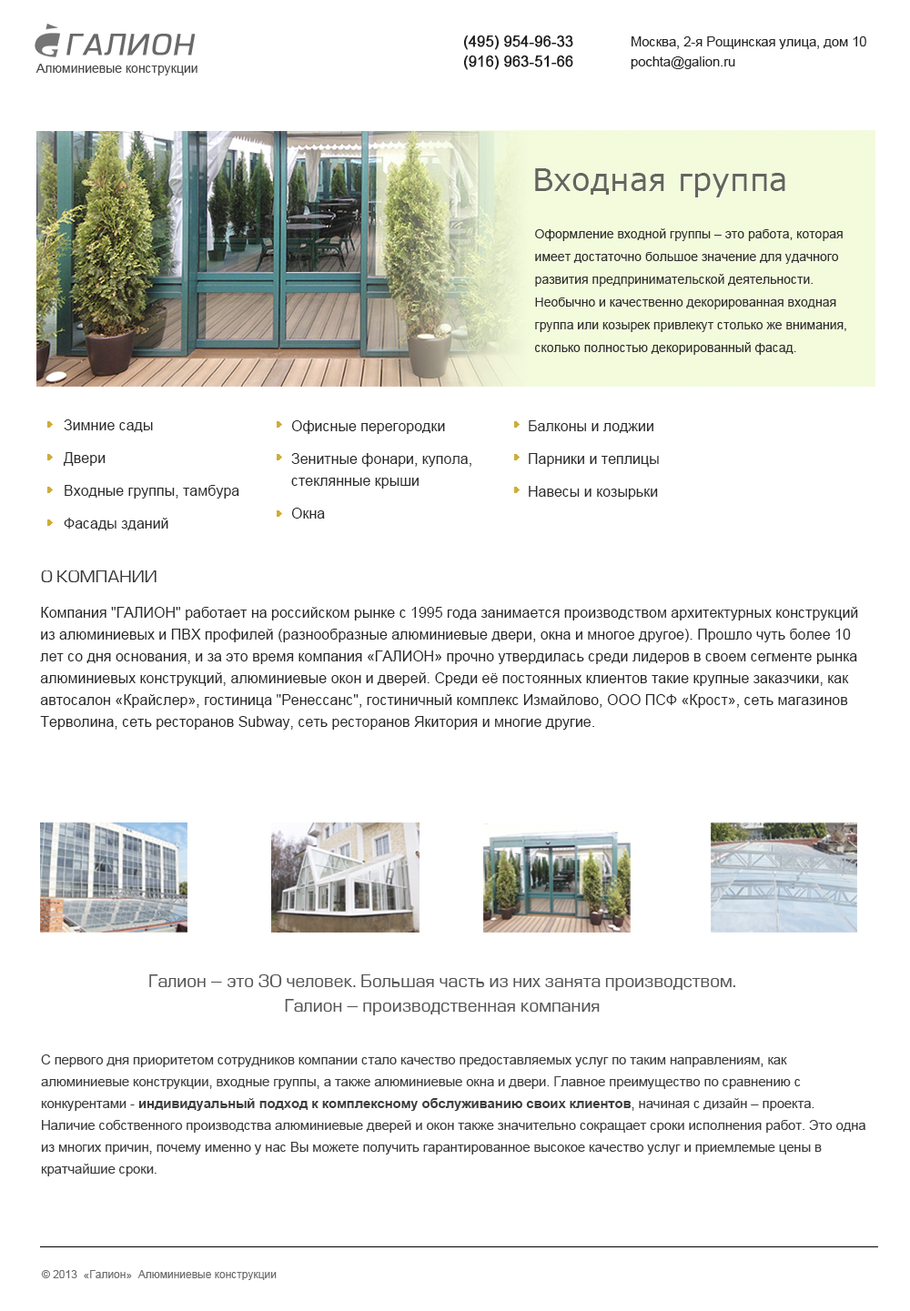
<style>
.page{position:relative;width:910px;height:1311px;background:#ffffff}
.page>*{position:absolute;margin:0}
.t1{font:27.3px "Europe-Italic";letter-spacing:0.06em;color:#696969;font-weight:bold}
.t2{font:14.6px/20px "ArialMT";color:#1f1f1f;font-weight:bold}
.t3{font:13.3px/20px "ArialMT";color:#262525}
.t4{font:12.7px "ArialMT";color:#4c4c4c}
.t5{font:30.9px "Verdana";color:#63665d}
.t6{font:12.7px/22.7px "ArialMT";color:#313131}
.t7{font:14.6px/32.7px "ArialMT";color:#2b2b2b}
.t8{font:14.6px/21.8px "ArialMT";color:#2b2b2b}
.t9{font:16.4px "EuropeNormal";color:#363636;text-transform:uppercase}
.t10{font:14.6px/21.8px "ArialMT";color:#282828}
.t11{font:17.3px/24.6px "EuropeNormal";color:#545454}
.t12{font:13.3px/21.8px "ArialMT";color:#3e3e3e}
.t13{font:13.3px/21.8px "Arial-BoldMT";color:#3e3e3e}
.t14{font:10.9px "ArialMT";color:#6d6d6d}
</style>
<div class="page">
<p class="t1" style="left:66px;top:34px;width:130px;height:21px">ГАЛИОН</p>
<p class="t2" style="left:463px;top:35px;width:110px;height:35px">(495) 954-96-33<br>(916) 963-51-66</p>
<p class="t3" style="left:630px;top:36px;width:236px;height:33px">Москва, 2-я Рощинская улица, дом 10<br>pochta@galion.ru</p>
<p class="t4" style="left:35px;top:64px;width:162px;height:12px">Алюминиевые конструкции</p>
<p class="t5" style="left:535px;top:168px;width:250px;height:29px">Входная группа</p>
<p class="t6" style="left:535px;top:228px;width:311px;height:127px">Оформление входной группы – это работа, которая имеет достаточно большое значение для удачного развития предпринимательской деятельности. Необычно и качественно декорированная входная группа или козырек привлекут столько же внимания, сколько полностью декорированный фасад.</p>
<p class="t7" style="left:63px;top:419px;width:176px;height:111px">Зимние сады<br>Двери<br>Входные группы, тамбура<br>Фасады зданий</p>
<p class="t7" style="left:291px;top:420px;width:180px;height:99px">Офисные перегородки<br>Зенитные фонари, купола,<br><span class="t8">стеклянные крыши<br></span>Окна</p>
<p class="t7" style="left:529px;top:420px;width:130px;height:79px">Балконы и лоджии<br>Парники и теплицы<br>Навесы и козырьки</p>
<p class="t9" style="left:41px;top:570px;width:115px;height:12px">О Компании</p>
<p class="t10" style="left:40px;top:607px;width:818px;height:123px">Компания "ГАЛИОН" работает на российском рынке с 1995 года занимается производством архитектурных конструкций из алюминиевых и ПВХ профилей (разнообразные алюминиевые двери, окна и многое другое). Прошло чуть более 10 лет со дня основания, и за это время компания «ГАЛИОН» прочно утвердилась среди лидеров в своем сегменте рынка алюминиевых конструкций, алюминиевые окон и дверей. Среди её постоянных клиентов такие крупные заказчики, как автосалон «Крайслер», гостиница "Ренессанс", гостиничный комплекс Измайлово, ООО ПСФ «Крост», сеть магазинов Терволина, сеть ресторанов Subway, сеть ресторанов Якитория и многие другие.</p>
<p class="t11" style="left:149px;top:974px;width:586px;height:41px;text-align:center">Галион – это 30 человек. Большая часть из них занята производством.<br>Галион – производственная компания</p>
<p class="t12" style="left:41px;top:1054px;width:824px;height:122px">С первого дня приоритетом сотрудников компании стало качество предоставляемых услуг по таким направлениям, как алюминиевые конструкции, входные группы, а также алюминиевые окна и двери. Главное преимущество по сравнению с конкурентами - <span class="t13">индивидуальный подход к комплексному обслуживанию своих клиентов</span>, начиная с дизайн – проекта. Наличие собственного производства алюминиевые дверей и окон также значительно сокращает сроки исполнения работ. Это одна из многих причин, почему именно у нас Вы можете получить гарантированное высокое качество услуг и приемлемые цены в кратчайшие сроки.</p>
<p class="t14" style="left:41px;top:1270px;width:236px;height:10px">© 2013  «Галион»  Алюминиевые конструкции</p>
</div>
